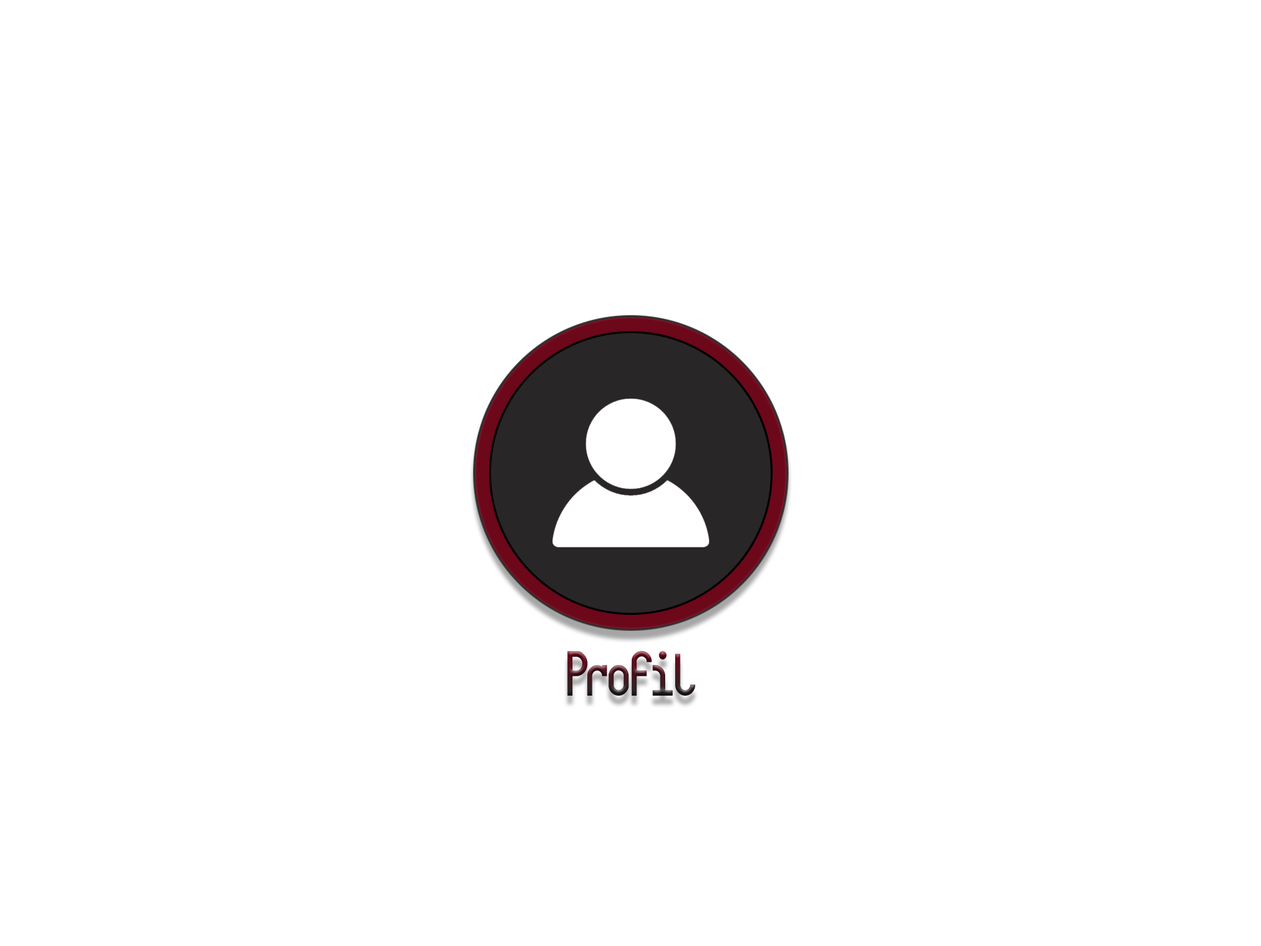
<style>
.page{position:relative;width:1261px;height:946px;background:#ffffff}
.page>*{position:absolute;margin:0}
.t1{font:55.6px "Targa";scale:0.9 1}
</style>
<div class="page">
<p class="t1" style="left:567px;top:651px;width:128px;height:44px">Profil</p>
</div>
